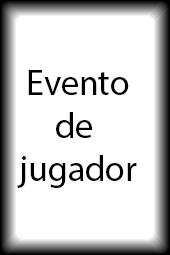
<style>
.page{position:relative;width:170px;height:255px;background:#ffffff}
.page>*{position:absolute;margin:0}
.t1{font:36px "MyriadPro-Regular";color:#000000}
</style>
<div class="page">
<p class="t1" style="left:17px;top:70px;width:120px;height:118px;text-align:center">Evento<br>de <br>jugador</p>
</div>
